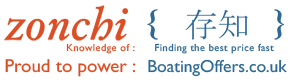
<style>
.page{position:relative;width:290px;height:80px;background:#ffffff}
.page>*{position:absolute;margin:0}
.t1{font:10.2px "GillSansMT";letter-spacing:0.05em;color:#2d6993}
.t2{font:10.2px "GillSansMT";letter-spacing:0.05em;color:#dc4f26}
.t3{font:18.8px "GillSansMT";color:#dc4f26}
.t4{font:17.5px "GillSansMT";color:#2d6993}
</style>
<div class="page">
<p class="t1" style="left:66px;top:43px;width:208px;height:11px"><span class="t2">Knowledge of :      </span>Finding the best price fast</p>
<p class="t3" style="left:5px;top:59px;width:131px;height:18px">Proud to power :</p>
<p class="t4" style="left:148px;top:59px;width:139px;height:18px">BoatingOffers.co.uk</p>
</div>
